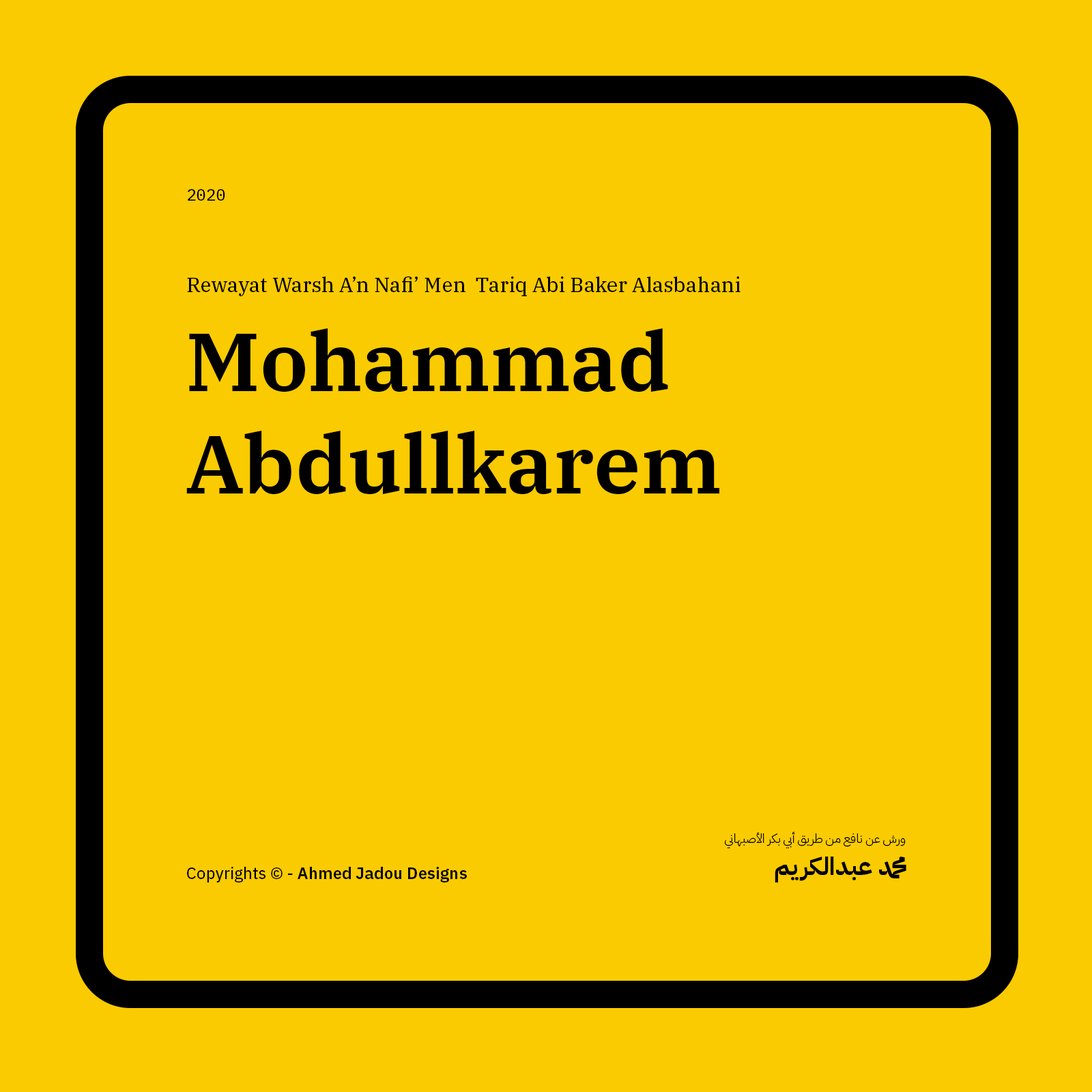
<style>
.page{position:relative;width:1092px;height:1092px;background:#facb00}
.page>*{position:absolute;margin:0}
.t1{font:16.4px "IBMPlexMono-Text";color:#000000}
.t2{font:20.5px "IBMPlexSerif-Text";color:#000000}
.t3{font:81.9px/102.7px "IBMPlexSerif-SemiBold";color:#000000}
.t4{font:12.3px "IBMPlexArabic-Light";color:#000000}
.t5{font:24.6px "IBMPlexArabic-Bold";color:#000000}
.t6{font:16.4px "IBMPlexSans-SemiBold";color:#000000}
.t7{font:16.4px "IBMPlexSans-Text";color:#000000}
</style>
<div class="page">
<p class="t1" style="left:188px;top:189px;width:37px;height:12px">2020</p>
<p class="t2" style="left:187px;top:276px;width:554px;height:20px">Rewayat Warsh A’n Nafi’ Men  Tariq Abi Baker Alasbahani</p>
<p class="t3" style="left:186px;top:328px;width:533px;height:166px">Mohammad Abdullkarem</p>
<p class="t4" style="left:725px;top:831px;width:181px;height:17px">ورش عن نافع من طريق أبي بكر الأصبهاني</p>
<p class="t5" style="left:775px;top:857px;width:131px;height:25px">محمد عبدالكريم</p>
<p class="t6" style="left:187px;top:867px;width:280px;height:15px"><span class="t7">Copyrights © - </span>Ahmed Jadou Designs</p>
</div>
